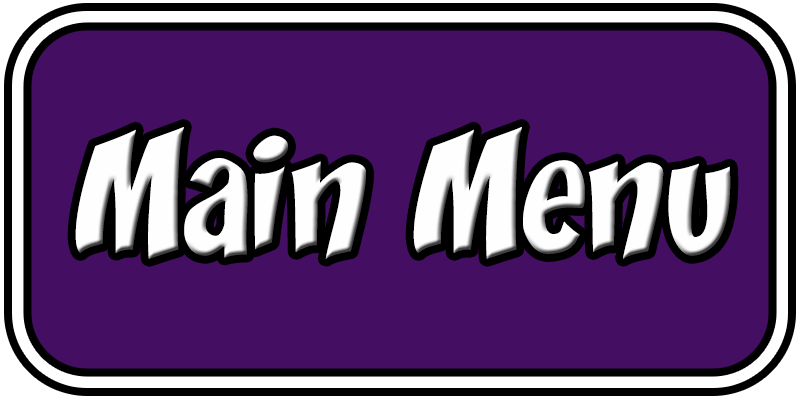
<style>
.page{position:relative;width:800px;height:400px;background:#440e62}
.page>*{position:absolute;margin:0}
.t1{font:153.4px "Yikes";color:#fefefe}
</style>
<div class="page">
<p class="t1" style="left:75px;top:127px;width:656px;height:132px">Main Menu</p>
</div>
